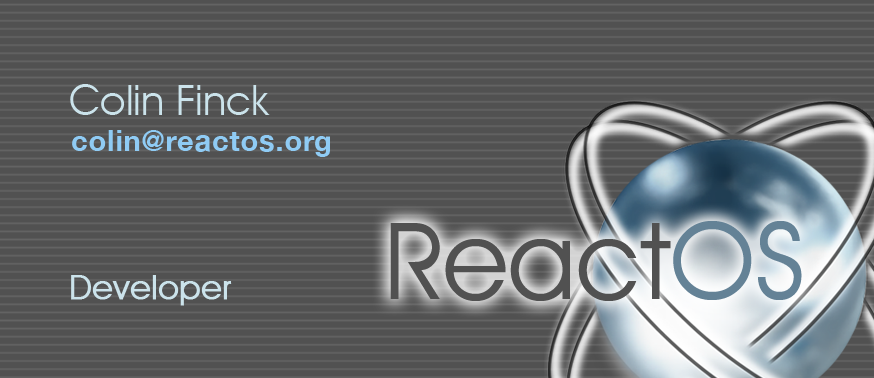
<style>
.page{position:relative;width:874px;height:378px;background:#515151}
.page>*{position:absolute;margin:0}
.t1{font:41.7px "AvantGardeITCbyBT-Book";color:#cbe3eb}
.t2{font:29.2px "HelveticaNeue-Bold";letter-spacing:0.025em;color:#8fcbf4}
.t3{font:107.5px "AvantGardeITCbyBT-Book";color:#515151}
.t4{font:107.5px "AvantGardeITCbyBT-Book";color:#648296}
.t5{font:33.3px "AvantGardeITCbyBT-Book";color:#cbe3eb;font-weight:bold}
</style>
<div class="page">
<p class="t1" style="left:70px;top:84px;width:200px;height:31px">Colin Finck</p>
<p class="t2" style="left:72px;top:130px;width:258px;height:27px">colin@reactos.org</p>
<p class="t3" style="left:390px;top:221px;width:412px;height:80px">React<span class="t4">OS</span></p>
<p class="t5" style="left:71px;top:275px;width:161px;height:31px">Developer</p>
</div>
